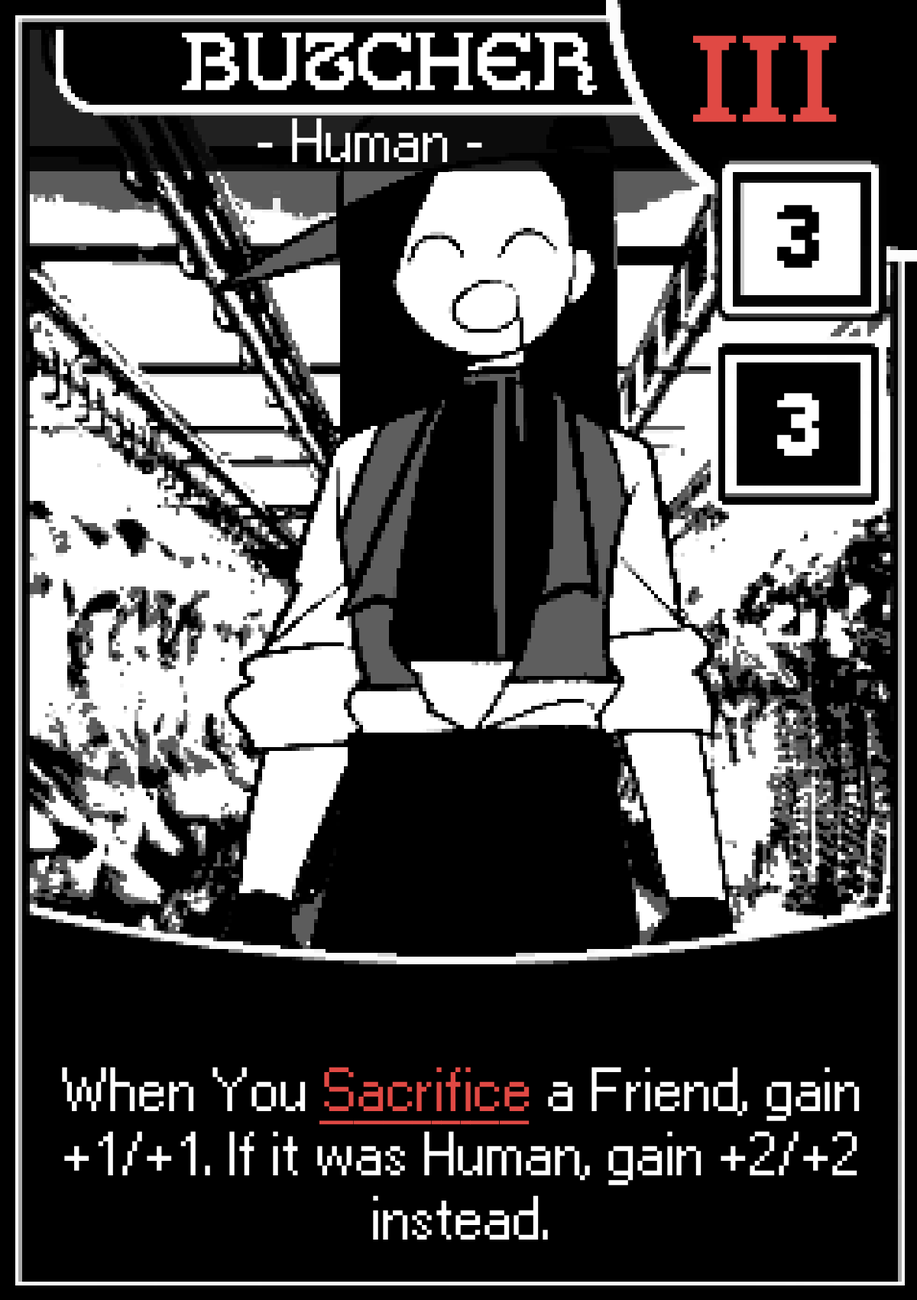
<style>
.page{position:relative;width:917px;height:1300px;background:#000000}
.page>*{position:absolute;margin:0}
.t1{font:76.5px "GallaeciaForte";color:#ffffff}
.t2{font:114.7px "GallaeciaForte";color:#e04944}
.t3{font:53.5px "Ari-W9500-Regular";color:#ffffff}
.t4{font:76.5px "AriW9500-Condensed-Display";color:#000000}
.t5{font:76.5px "AriW9500-Condensed-Display";color:#ffffff}
.t6{font:53.5px "Ari-W9500-Regular";color:#e04944;text-decoration:underline}
</style>
<div class="page">
<p class="t1" style="left:182px;top:32px;width:416px;height:63px">Butcher</p>
<p class="t2" style="left:693px;top:35px;width:144px;height:87px">III</p>
<p class="t3" style="left:258px;top:118px;width:224px;height:44px">- Human -</p>
<p class="t4" style="left:778px;top:205px;width:42px;height:63px">3</p>
<p class="t5" style="left:778px;top:393px;width:42px;height:63px">3</p>
<p class="t3" style="left:62px;top:1067px;width:798px;height:172px;text-align:center">When You <span class="t6">Sacrifice </span>a Friend, gain +1/+1. If it was Human, gain +2/+2 instead.</p>
</div>
